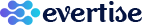
<style>
.page{position:relative;width:163px;height:25px;background:#ffffff}
.page>*{position:absolute;margin:0}
.t1{font:40px "DreamwoodDEMO-Regular";color:#051441;scale:0.88 1}
</style>
<div class="page">
<p class="t1" style="left:42px;top:1px;width:100px;height:21px">evertise</p>
</div>
